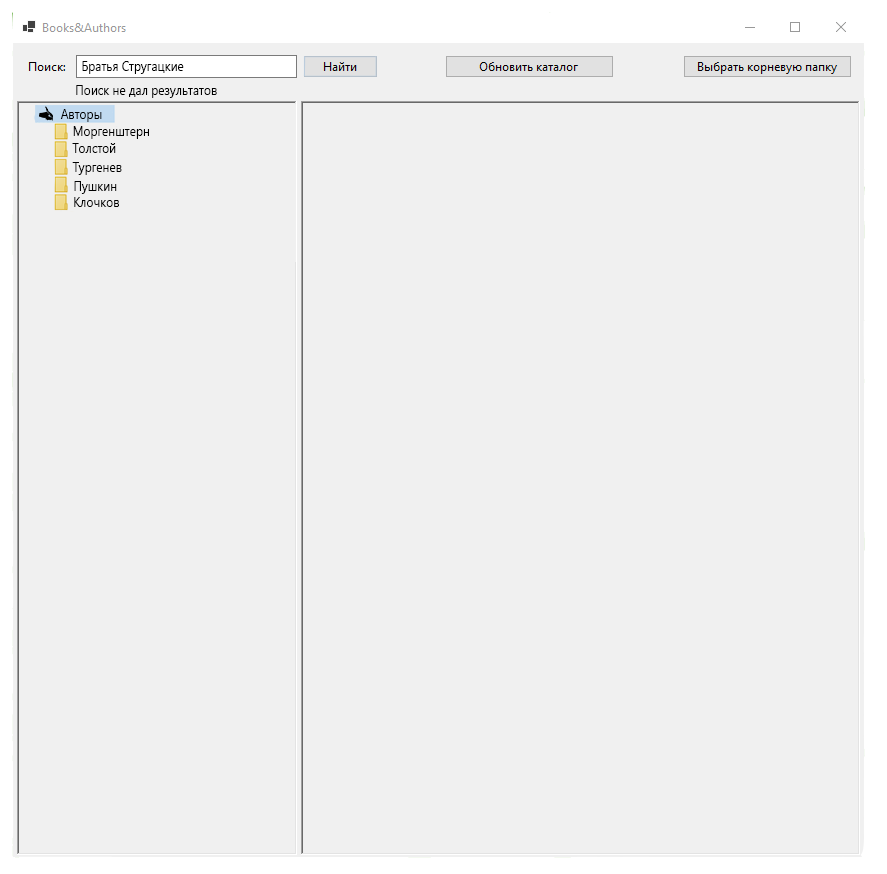
<style>
.page{position:relative;width:887px;height:874px;background:#f0f0f0}
.page>*{position:absolute;margin:0}
.t1{font:13.5px "SegoeUI";color:#000000;scale:0.89 1}
</style>
<div class="page">
<p class="t1" style="left:82px;top:61px;width:102px;height:13px">Братья Стругацкие</p>
<p class="t1" style="left:76px;top:85px;width:141px;height:13px">Поиск не дал результатов</p>
<p class="t1" style="left:60px;top:109px;width:42px;height:13px">Авторы</p>
<p class="t1" style="left:73px;top:126px;width:76px;height:13px">Моргенштерн</p>
<p class="t1" style="left:72px;top:143px;width:44px;height:10px">Толстой</p>
<p class="t1" style="left:72px;top:162px;width:50px;height:13px">Тургенев</p>
<p class="t1" style="left:74px;top:181px;width:43px;height:13px">Пушкин</p>
<p class="t1" style="left:74px;top:197px;width:45px;height:10px">Клочков</p>
</div>
